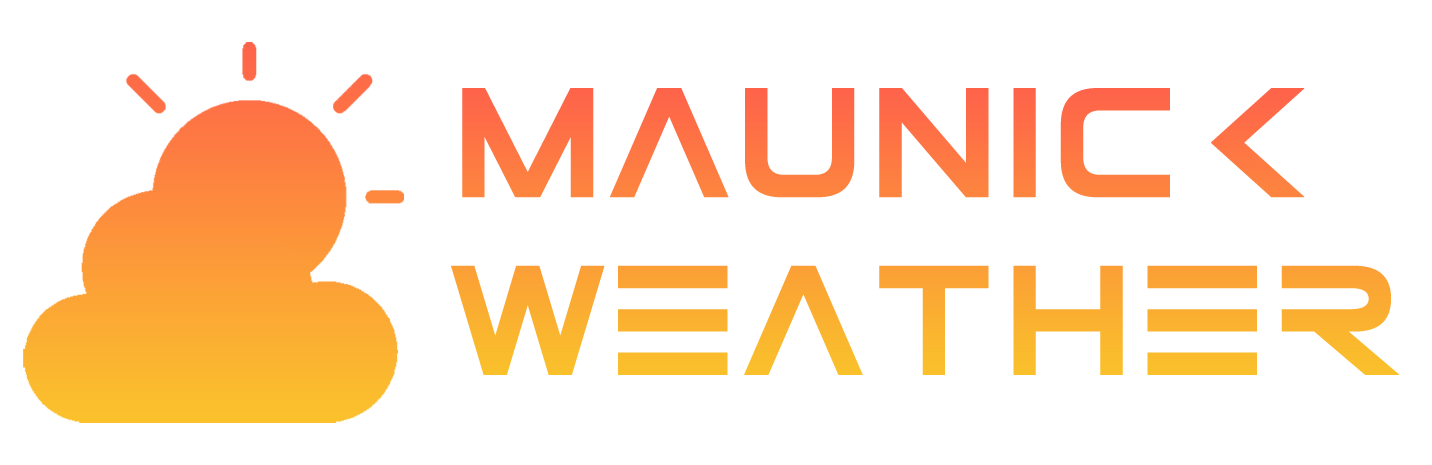
<style>
.page{position:relative;width:1432px;height:465px;background:#ffffff}
.page>*{position:absolute;margin:0}
.t1{font:148.1px "ElementalEnd";text-transform:uppercase;font-weight:bold}
</style>
<div class="page">
<p class="t1" style="left:451px;top:88px;width:948px;height:287px">maunick <br>weather</p>
</div>
